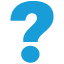
<style>
.page{position:relative;width:64px;height:64px;background:#ffffff}
.page>*{position:absolute;margin:0}
.t1{font:83.5px "Graphik-Bold";color:#189dd9}
</style>
<div class="page">
<p class="t1" style="left:10px;top:1px;width:44px;height:62px">?</p>
</div>
